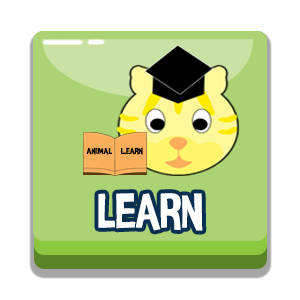
<style>
.page{position:relative;width:300px;height:300px;background:#ffffff}
.page>*{position:absolute;margin:0}
.t1{font:8.8px "InsideOut";color:#000000;scale:1.09 1}
.t2{font:50px "InsideOut";color:#ffffff}
</style>
<div class="page">
<p class="t1" style="left:86px;top:147px;width:26px;height:8px">animal</p>
<p class="t1" style="left:121px;top:147px;width:22px;height:8px">Learn</p>
<p class="t2" style="left:98px;top:193px;width:105px;height:38px">learn</p>
</div>
